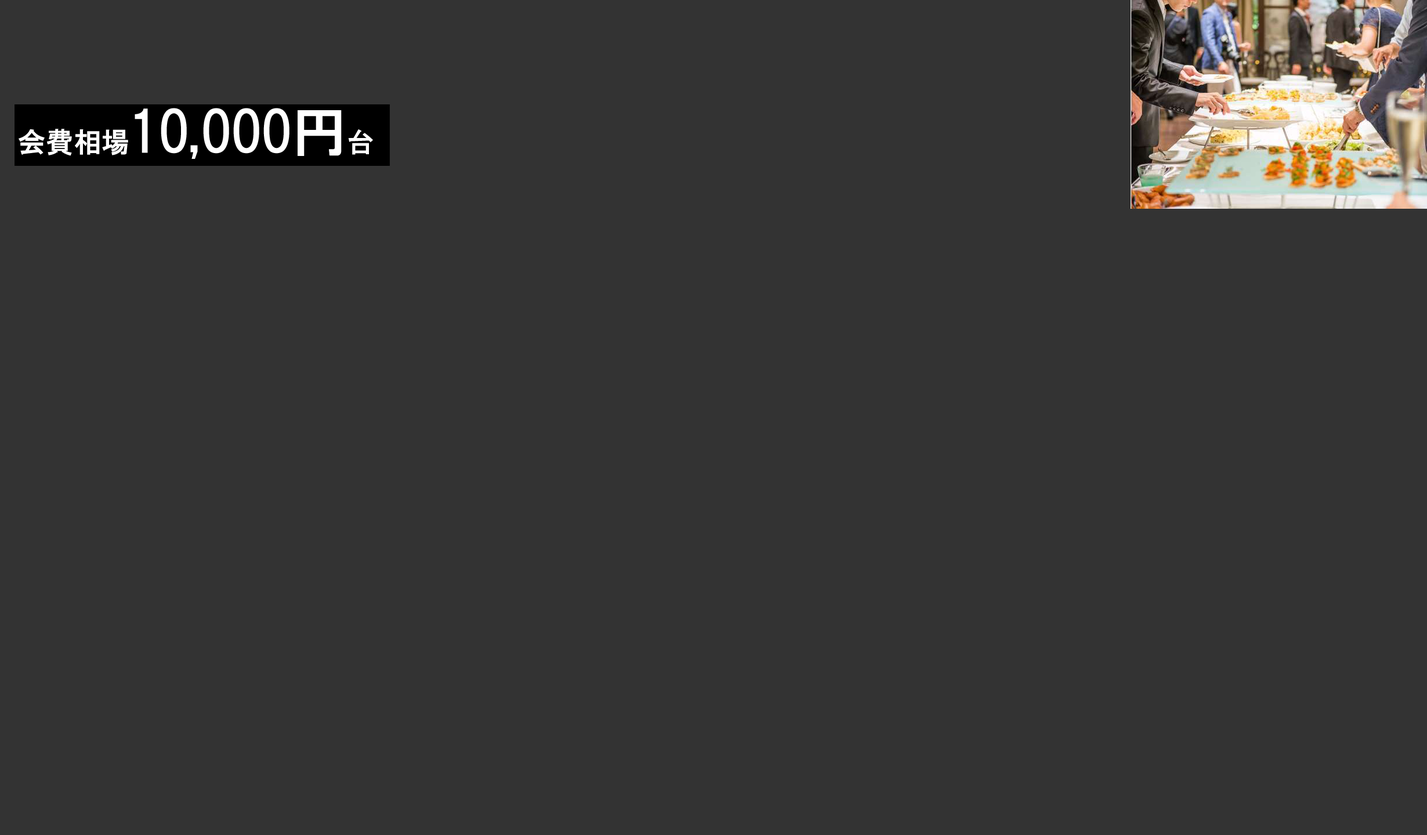
<style>
.page{position:relative;width:1427px;height:835px;background:#333333}
.page>*{position:absolute;margin:0}
.t1{font:55.5px "HGSGothicE";color:#ffffff}
.t2{font:27.7px "HGSGothicE";color:#ffffff}
</style>
<div class="page">
<p class="t1" style="left:19px;top:108px;width:354px;height:51px"><span class="t2">会費相場</span>10,000円<span class="t2">台</span></p>
</div>
